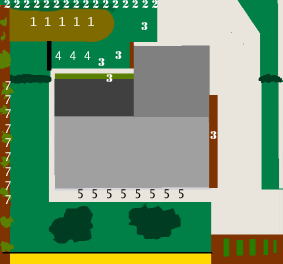
<style>
.page{position:relative;width:283px;height:264px;background:#007f46}
.page>*{position:absolute;margin:0}
.t1{font:12px "LucidaConsole";color:#ffffff}
.t2{font:12px "Stencil";color:#ffffff}
.t3{font:12px "LucidaConsole";color:#000000}
</style>
<div class="page">
<p class="t1" style="left:30px;top:17px;width:64px;height:9px"><span class="t2"> </span>1 1 1 1 1</p>
<p class="t2" style="left:141px;top:22px;width:7px;height:8px">3</p>
<p class="t1" style="left:55px;top:51px;width:36px;height:9px"><span class="t2"> </span>4 4 4</p>
<p class="t2" style="left:115px;top:51px;width:7px;height:8px">3</p>
<p class="t2" style="left:98px;top:58px;width:7px;height:8px">3</p>
<p class="t2" style="left:106px;top:74px;width:7px;height:8px">3</p>
<p class="t1" style="left:5px;top:81px;width:6px;height:123px;text-align:center">7<br>7<br>7<br>7<br>7<br>7<br>7<br>7<br>7</p>
<p class="t2" style="left:210px;top:131px;width:7px;height:8px">3</p>
<p class="t3" style="left:78px;top:189px;width:106px;height:10px">5 5 5 5 5 5 5 5</p>
</div>
